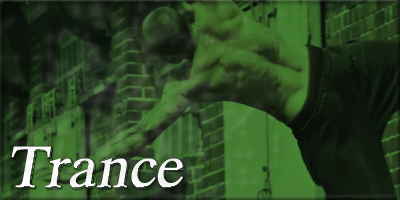
<style>
.page{position:relative;width:400px;height:200px}
.page>*{position:absolute;margin:0}
.t1{font:58.3px "Dutch801BT-Roman";letter-spacing:-0.025em;color:#ffffff;font-weight:bold;font-style:italic}
</style>
<div class="page">
<p class="t1" style="left:11px;top:146px;width:172px;height:42px">Trance</p>
</div>
